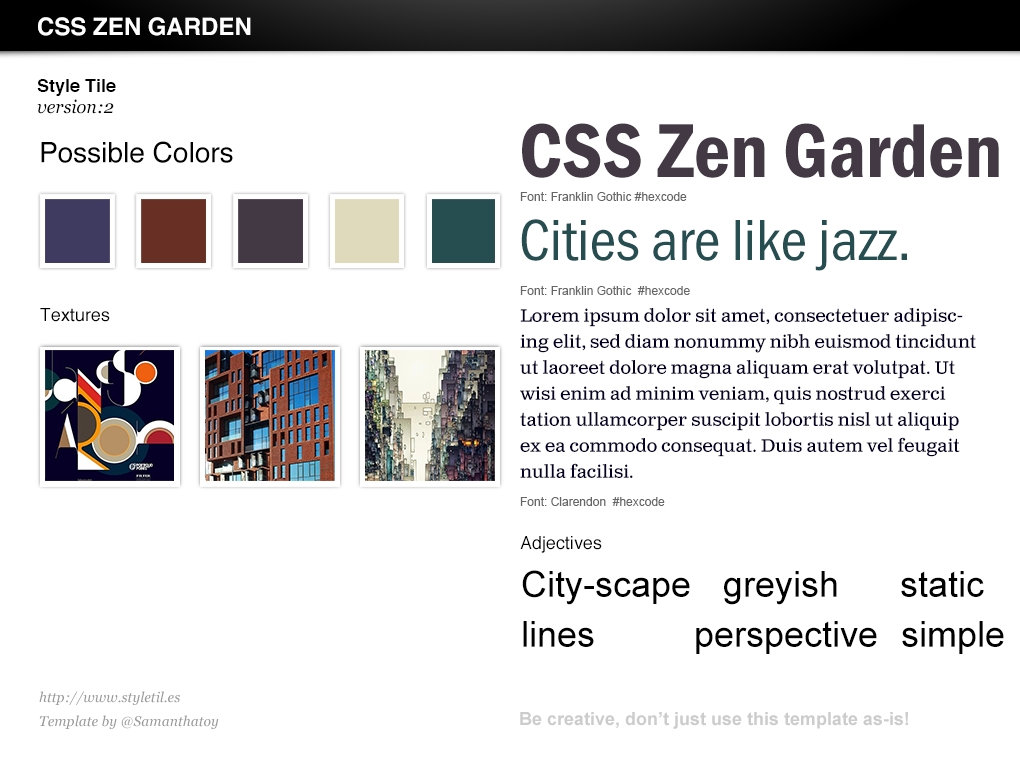
<style>
.page{position:relative;width:1020px;height:760px;background:#ffffff}
.page>*{position:absolute;margin:0}
.t1{font:24px "Helvetica-Bold";color:#ffffff}
.t2{font:18px "Helvetica-Bold";color:#000000}
.t3{font:18px "Georgia-Italic";color:#000000}
.t4{font:79px "FranklinGothicURWCon-Dem";color:#433945}
.t5{font:28.1px "Helvetica";color:#000000}
.t6{font:12px "ArialMT";color:#666666}
.t7{font:60px "FranklinGothicURWCon-Boo";color:#264d50}
.t8{font:18px "Helvetica";color:#000000}
.t9{font:18px/26px "ClarendonTextPro";color:#070026}
.t10{font:36px "ArialMT";color:#000000}
.t11{font:14px/24px "Georgia-Italic";color:#999999}
.t12{font:18px "Arial-BoldMT";color:#cccccc}
</style>
<div class="page">
<p class="t1" style="left:38px;top:17px;width:213px;height:19px">CSS ZEN GARDEN</p>
<p class="t2" style="left:37px;top:79px;width:79px;height:17px">Style Tile</p>
<p class="t3" style="left:37px;top:99px;width:77px;height:15px">version:2</p>
<p class="t4" style="left:522px;top:123px;width:477px;height:55px">CSS Zen Garden</p>
<p class="t5" style="left:41px;top:141px;width:192px;height:22px">Possible Colors</p>
<p class="t6" style="left:520px;top:192px;width:167px;height:9px">Font: Franklin Gothic #hexcode</p>
<p class="t7" style="left:521px;top:219px;width:386px;height:52px">Cities are like jazz.</p>
<p class="t6" style="left:520px;top:286px;width:170px;height:9px">Font: Franklin Gothic  #hexcode</p>
<p class="t8" style="left:40px;top:308px;width:70px;height:14px">Textures</p>
<p class="t9" style="left:520px;top:308px;width:456px;height:170px">Lorem ipsum dolor sit amet, consectetuer adipiscing elit, sed diam nonummy nibh euismod tincidunt ut laoreet dolore magna aliquam erat volutpat. Ut wisi enim ad minim veniam, quis nostrud exerci tation ullamcorper suscipit lobortis nisl ut aliquip ex ea commodo consequat. Duis autem vel feugait nulla facilisi.</p>
<p class="t6" style="left:520px;top:497px;width:145px;height:9px">Font: Clarendon  #hexcode</p>
<p class="t8" style="left:520px;top:536px;width:82px;height:17px">Adjectives</p>
<p class="t10" style="left:522px;top:570px;width:168px;height:35px">City-scape</p>
<p class="t10" style="left:724px;top:571px;width:113px;height:34px">greyish</p>
<p class="t10" style="left:901px;top:571px;width:83px;height:26px">static</p>
<p class="t10" style="left:523px;top:621px;width:71px;height:26px">lines</p>
<p class="t10" style="left:696px;top:621px;width:181px;height:33px">perspective</p>
<p class="t10" style="left:902px;top:621px;width:102px;height:33px">simple</p>
<p class="t11" style="left:39px;top:691px;width:180px;height:38px">http://www.styletil.es<br>Template by @Samanthatoy</p>
<p class="t12" style="left:520px;top:712px;width:388px;height:17px">Be creative, don’t just use this template as-is!</p>
</div>
